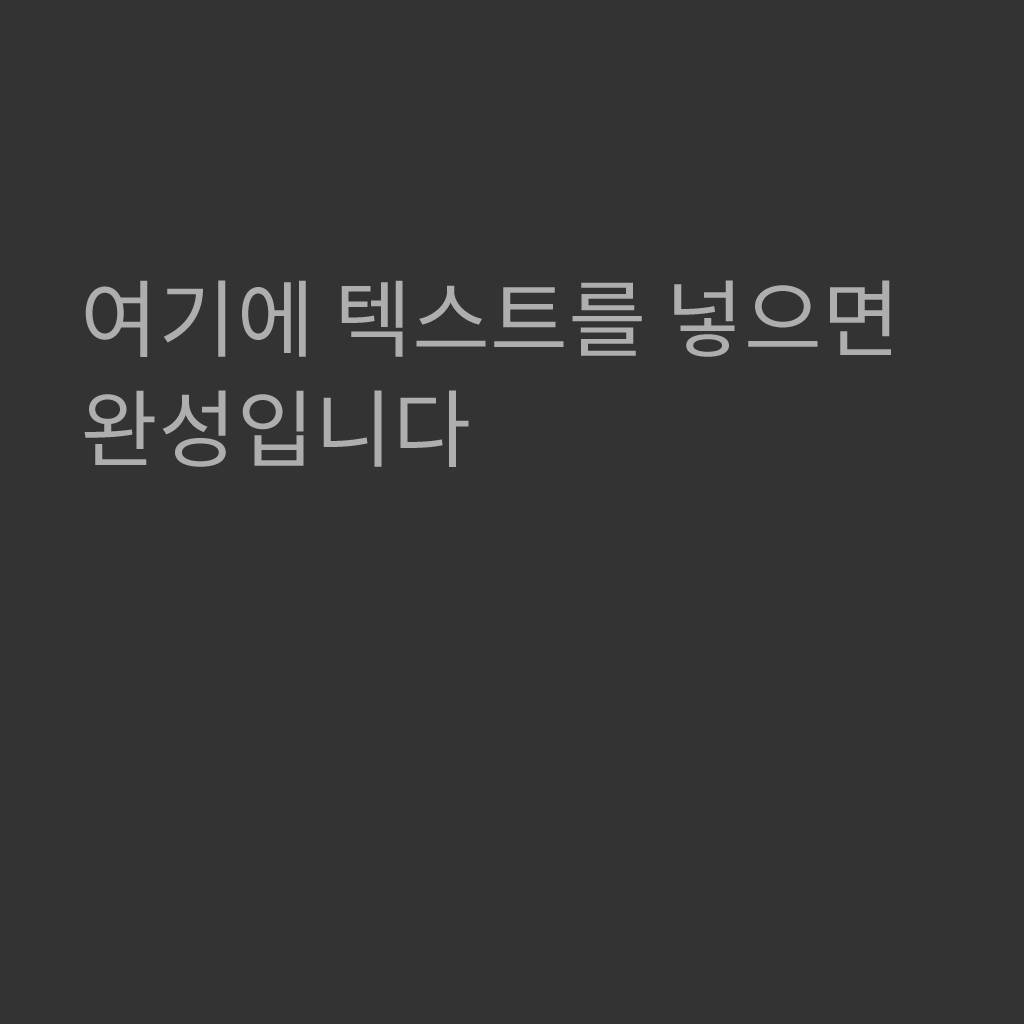
<style>
.page{position:relative;width:1024px;height:1024px;background:#333333}
.page>*{position:absolute;margin:0}
.t1{font:85px/110px "SourceHanSansKR-Regular";color:#aeaeae;text-transform:uppercase}
</style>
<div class="page">
<p class="t1" style="left:84px;top:280px;width:807px;height:187px;text-align:justify">여기에 텍스트를 넣으면<br>완성입니다</p>
</div>
